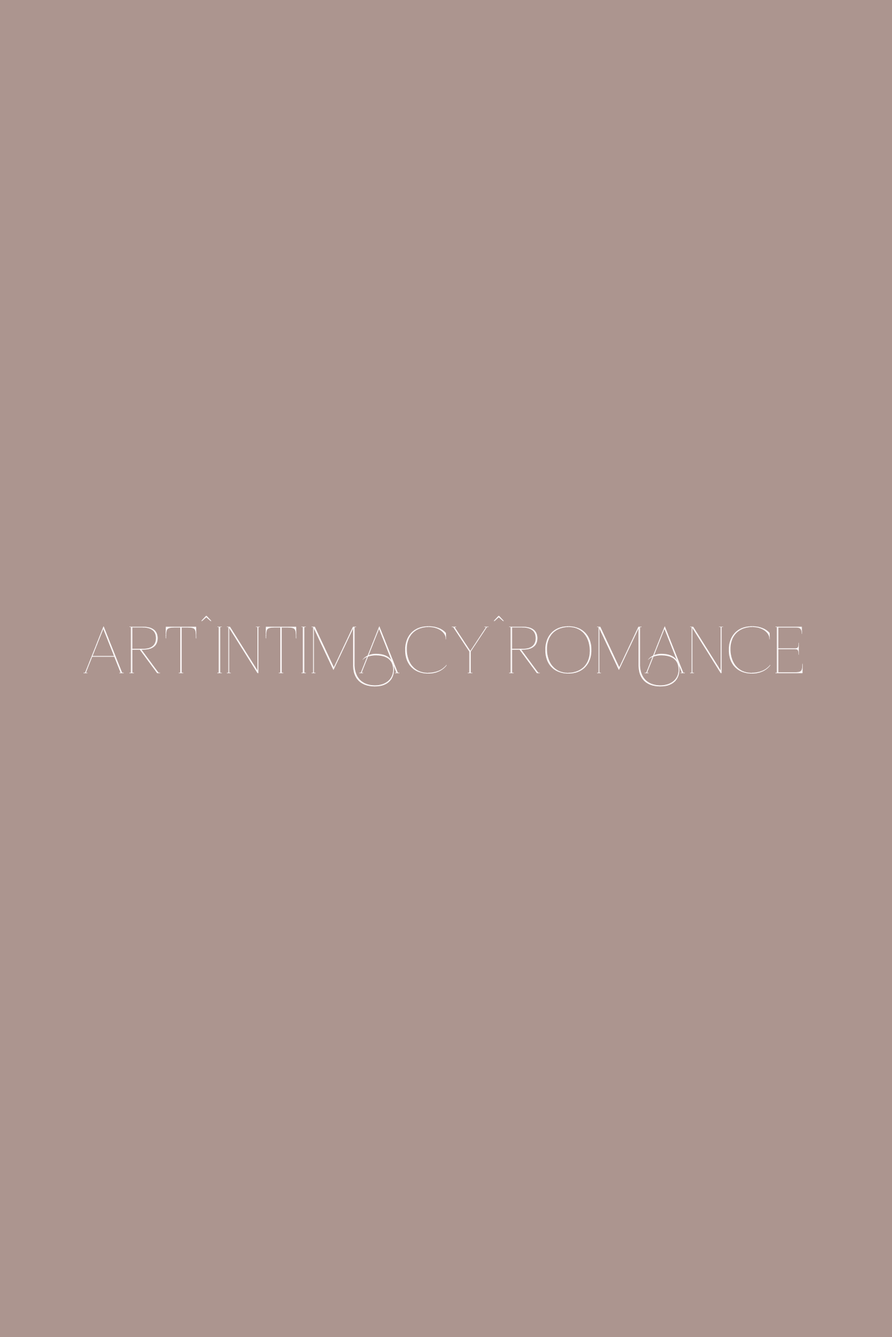
<style>
.page{position:relative;width:892px;height:1337px;background:#ac958f}
.page>*{position:absolute;margin:0}
.t1{font:54.7px "Mochreh";color:#fdf9f9}
</style>
<div class="page">
<p class="t1" style="left:83px;top:616px;width:719px;height:71px">ART^INTIMACY^ROMANCE</p>
</div>
